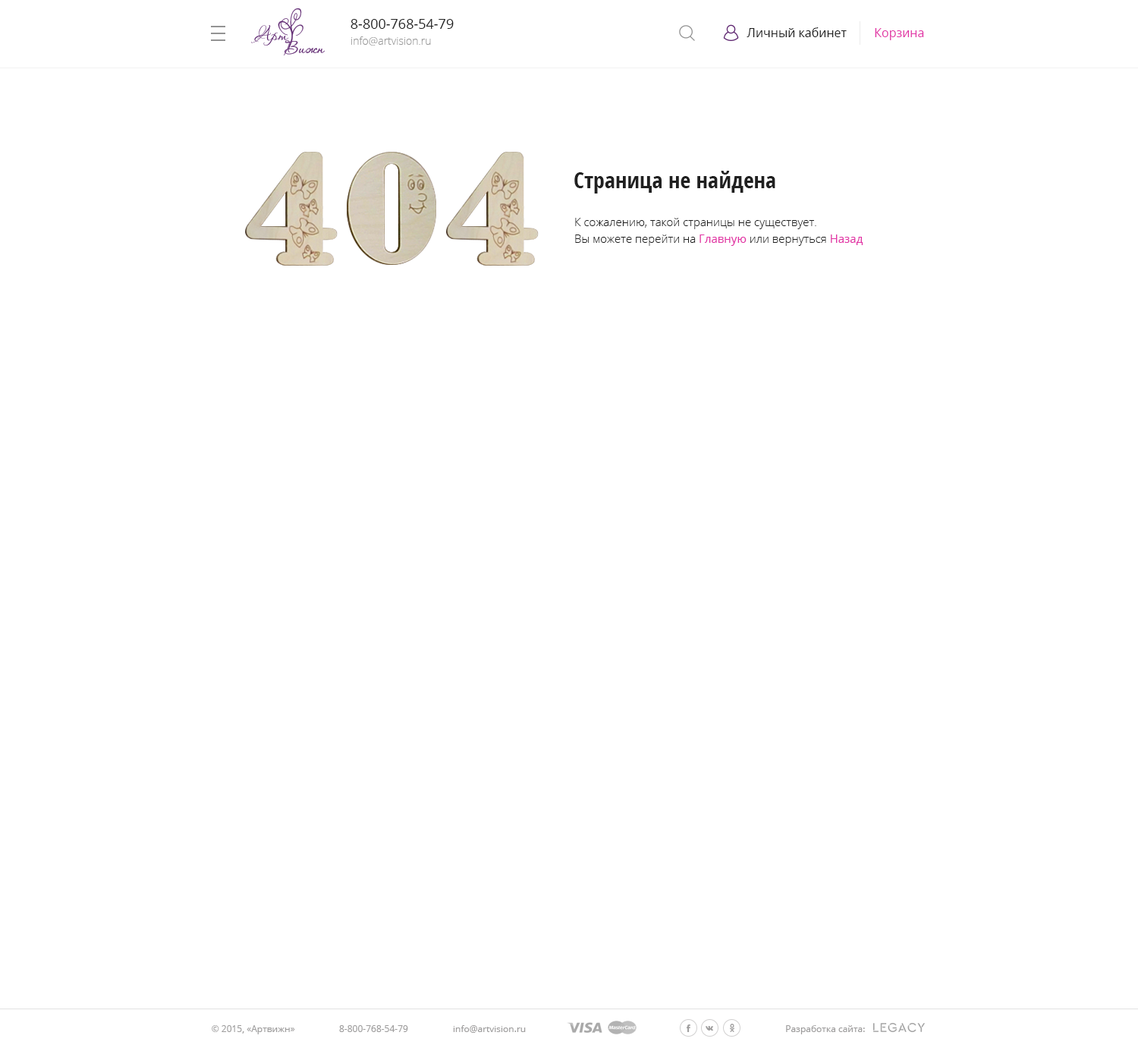
<style>
.page{position:relative;width:1138px;height:1048px;background:#ffffff}
.page>*{position:absolute;margin:0}
.t1{font:13.7px "OpenSans";color:#202020}
.t2{font:12.1px "OpenSans";color:#202020}
.t3{font:12.1px "OpenSans";color:#e233a6}
.t4{font:10.6px "OpenSans-Light";color:#999999}
.t5{font:22.8px "OpenSans-CondensedBold";color:#202020}
.t6{font:11.4px/16.7px "OpenSans-Light";color:#202020}
.t7{font:11.4px/16.7px "OpenSans";color:#e233a6}
.t8{font:9.1px "OpenSans";color:#9e9d9d}
</style>
<div class="page">
<p class="t1" style="left:351px;top:19px;width:103px;height:10px">8-800-768-54-79</p>
<p class="t2" style="left:747px;top:27px;width:100px;height:10px">Личный кабинет</p>
<p class="t3" style="left:875px;top:28px;width:49px;height:12px">Корзина</p>
<p class="t4" style="left:351px;top:36px;width:80px;height:10px">info@artvision.ru</p>
<p class="t5" style="left:574px;top:171px;width:201px;height:22px">Страница не найдена</p>
<p class="t6" style="left:575px;top:218px;width:288px;height:28px">К сожалению, такой страницы не существует. <br>Вы можете перейти на <span class="t7">Главную</span> или вернуться <span class="t7">Назад</span></p>
<p class="t8" style="left:212px;top:1025px;width:83px;height:9px">© 2015, «Артвижн»</p>
<p class="t8" style="left:339px;top:1025px;width:69px;height:7px">8-800-768-54-79</p>
<p class="t8" style="left:453px;top:1025px;width:73px;height:8px">info@artvision.ru</p>
<p class="t8" style="left:786px;top:1025px;width:79px;height:9px">Разработка сайта:</p>
</div>
